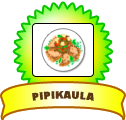
<style>
.page{position:relative;width:126px;height:120px;background:#ffffff}
.page>*{position:absolute;margin:0}
.t1{font:9.4px "Arial-Black";letter-spacing:0.045em;color:#5b3714;text-transform:uppercase}
</style>
<div class="page">
<p class="t1" style="left:32px;top:91px;width:62px;height:10px">pipikaula</p>
</div>
